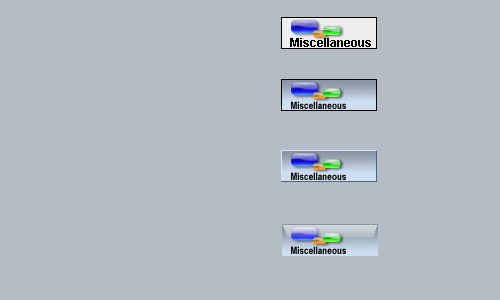
<style>
.page{position:relative;width:500px;height:300px;background:#b4bcc5}
.page>*{position:absolute;margin:0}
.t1{font:12px "Arial-BoldMT";color:#000000}
.t2{font:10px "ArialNarrow-Bold";color:#000000}
</style>
<div class="page">
<p class="t1" style="left:290px;top:38px;width:81px;height:9px">Miscellaneous</p>
<p class="t2" style="left:291px;top:101px;width:55px;height:8px">Miscellaneous</p>
<p class="t2" style="left:291px;top:172px;width:55px;height:8px">Miscellaneous</p>
<p class="t2" style="left:291px;top:246px;width:55px;height:8px">Miscellaneous</p>
</div>
